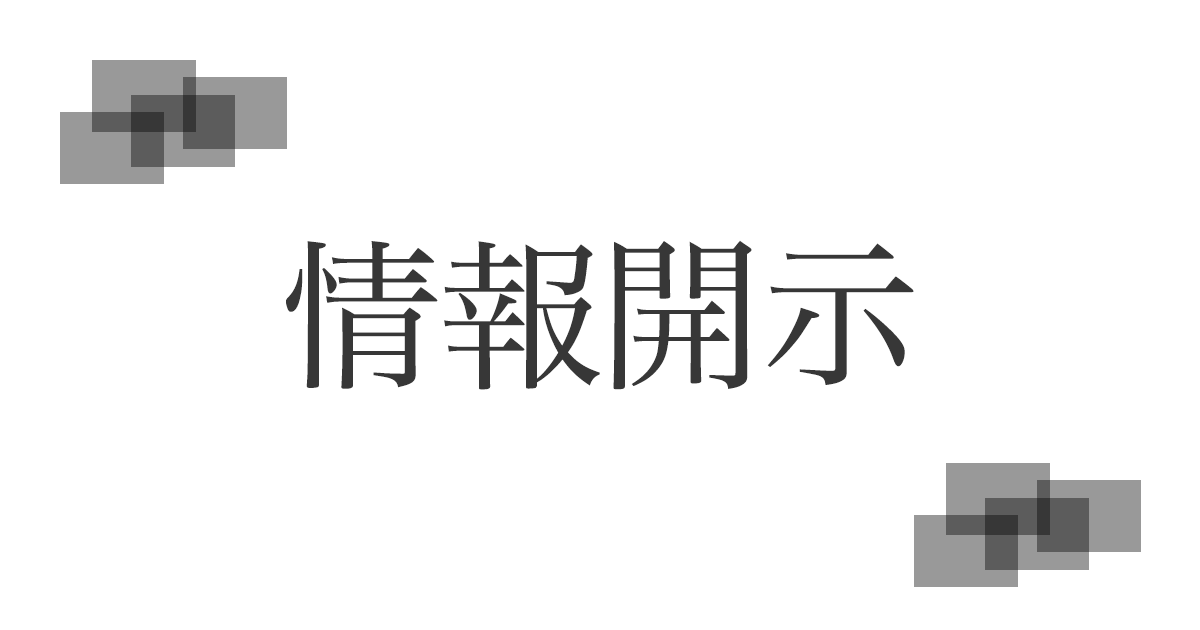
<style>
.page{position:relative;width:1200px;height:630px;background:#ffffff}
.page>*{position:absolute;margin:0}
.t1{font:160px "HiraMinPro-W3";color:#373737}
</style>
<div class="page">
<p class="t1" style="left:286px;top:240px;width:628px;height:150px">情報開示</p>
</div>
